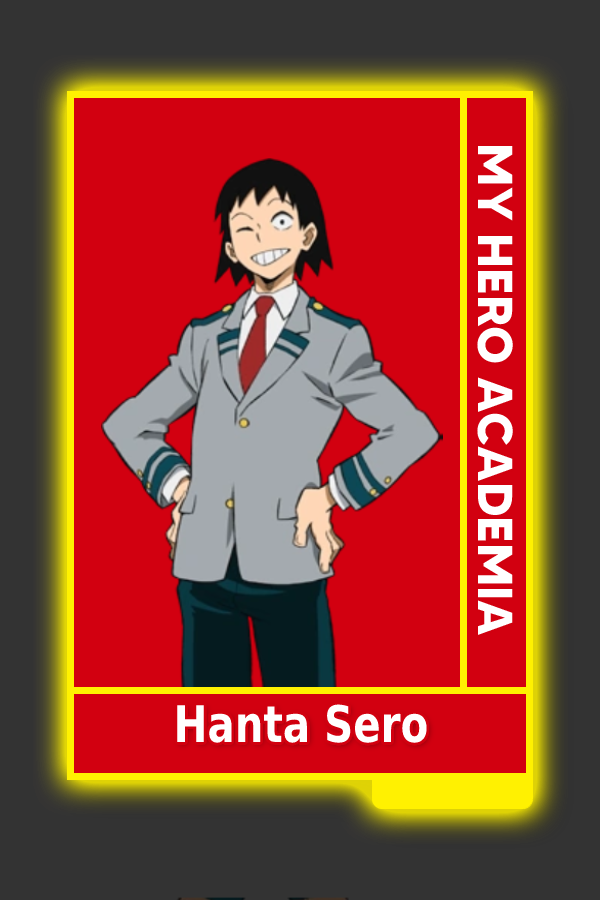
<style>
.page{position:relative;width:600px;height:900px;background:#d20010}
.page>*{position:absolute;margin:0}
.t1{font:48.8px "MADETOMMY-Bold";color:#ffffff}
.t2{font:50.5px "MADETOMMY-Bold";color:#ffffff;scale:0.8 1}
</style>
<div class="page">
<p class="t1" style="left:477px;top:146px;width:36px;height:489px;rotate:90deg">MY HERO ACADEMIA</p>
<p class="t2" style="left:177px;top:704px;width:250px;height:39px">Hanta Sero</p>
</div>
